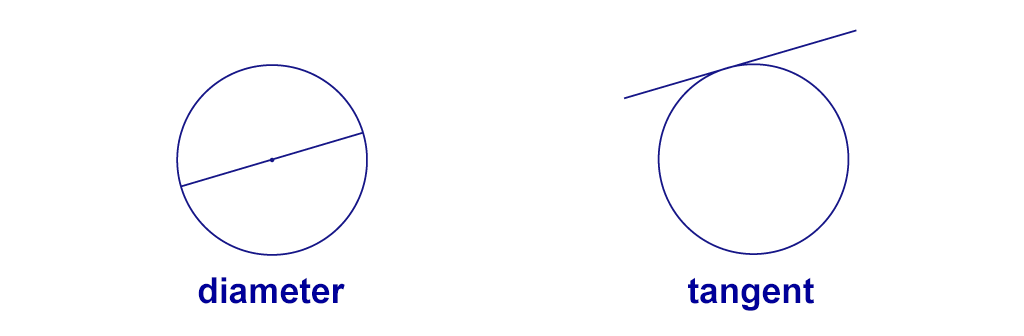
<style>
.page{position:relative;width:1024px;height:336px;background:#ffffff}
.page>*{position:absolute;margin:0}
.t1{font:36px "Arial-BoldMT";color:#000099}
</style>
<div class="page">
<p class="t1" style="left:198px;top:277px;width:147px;height:27px">diameter</p>
<p class="t1" style="left:688px;top:277px;width:126px;height:34px">tangent</p>
</div>
